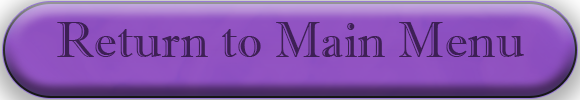
<style>
.page{position:relative;width:580px;height:100px}
.page>*{position:absolute;margin:0}
.t1{font:50px "ImprintMT-Shadow";color:#3e2055}
</style>
<div class="page">
<p class="t1" style="left:57px;top:22px;width:467px;height:35px">Return to Main Menu</p>
</div>
